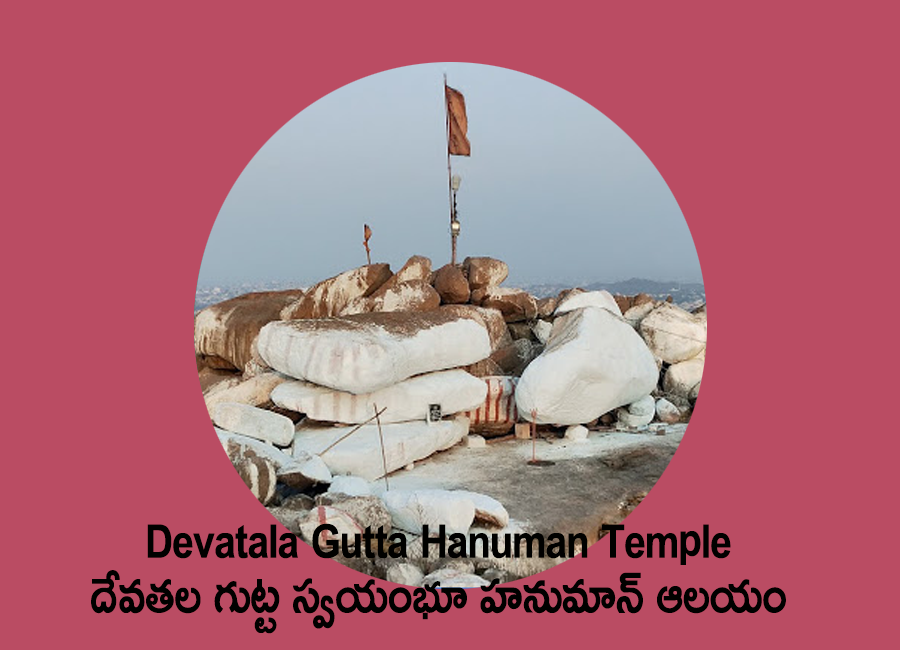
<style>
.page{position:relative;width:900px;height:650px;background:#ba4c63}
.page>*{position:absolute;margin:0}
.t1{font:56.7px/54.8px "Ramabhadra";letter-spacing:-0.005em;color:#010100;scale:0.84 1}
</style>
<div class="page">
<p class="t1" style="left:91px;top:523px;width:695px;height:111px;text-align:center">Devatala Gutta Hanuman Temple<br>దేవతల గుట్ట స్వయంభూ హనుమాన్ ఆలయం</p>
</div>
